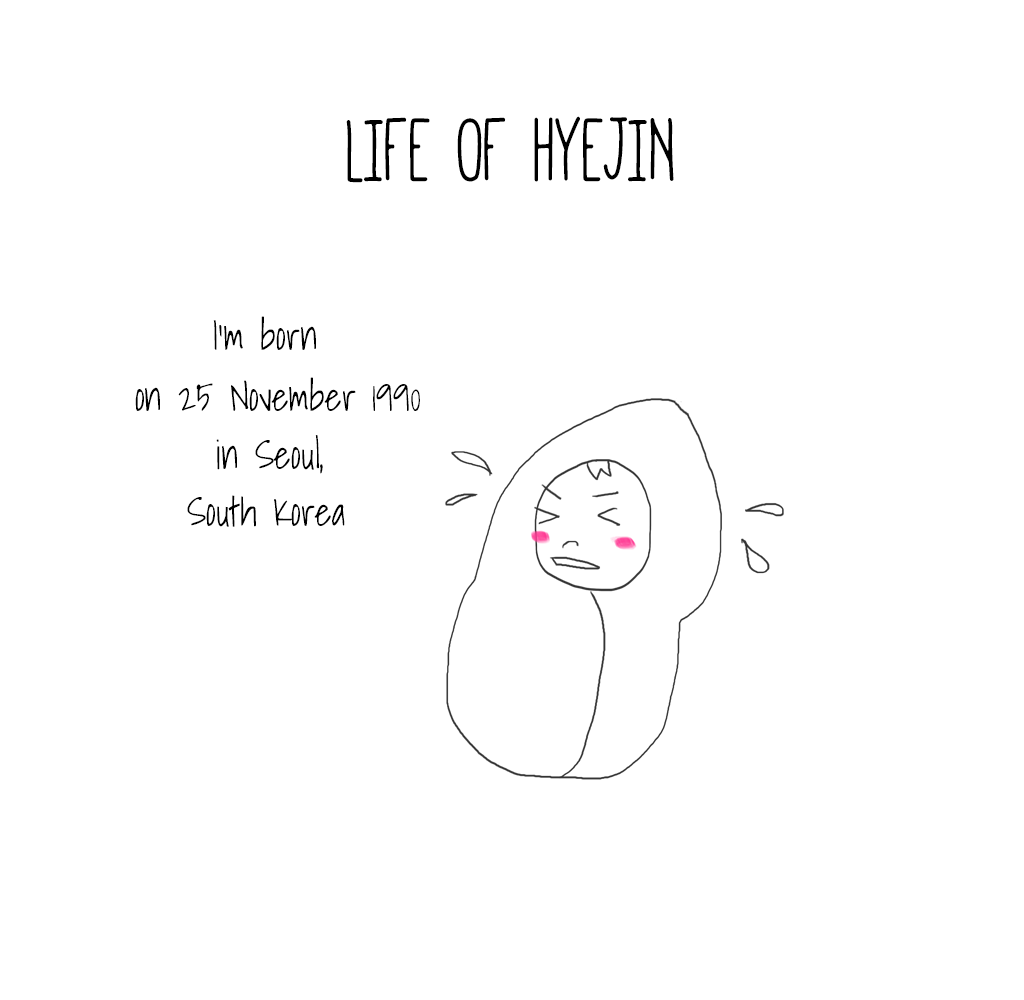
<style>
.page{position:relative;width:1024px;height:1000px;background:#ffffff}
.page>*{position:absolute;margin:0}
.t1{font:100px "Mathlete-Bulky";color:#000000;scale:0.9 1}
.t2{font:40px "ShadowsIntoLight";color:#000000;scale:0.9 1}
</style>
<div class="page">
<p class="t1" style="left:346px;top:116px;width:328px;height:67px">LIFE OF HYEJIN</p>
<p class="t2" style="left:213px;top:316px;width:103px;height:34px">I’m born</p>
<p class="t2" style="left:135px;top:377px;width:285px;height:34px">on 25 November 1990</p>
<p class="t2" style="left:216px;top:435px;width:107px;height:39px">in Seoul,</p>
<p class="t2" style="left:187px;top:495px;width:158px;height:32px">South Korea</p>
</div>
